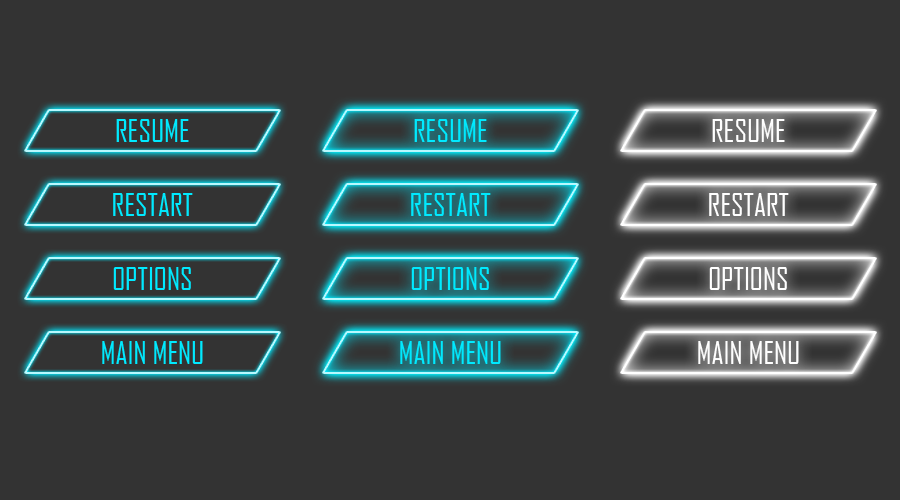
<style>
.page{position:relative;width:900px;height:500px;background:#333333}
.page>*{position:absolute;margin:0}
.t1{font:30px "AgencyFB-Reg";color:#00eaff}
.t2{font:30px "AgencyFB-Reg";color:#ffffff}
</style>
<div class="page">
<p class="t1" style="left:116px;top:119px;width:73px;height:23px">RESUME</p>
<p class="t1" style="left:414px;top:119px;width:73px;height:23px">RESUME</p>
<p class="t2" style="left:712px;top:119px;width:73px;height:23px">RESUME</p>
<p class="t1" style="left:113px;top:193px;width:80px;height:23px">RESTART</p>
<p class="t1" style="left:411px;top:193px;width:80px;height:23px">RESTART</p>
<p class="t2" style="left:709px;top:193px;width:80px;height:23px">RESTART</p>
<p class="t1" style="left:113px;top:267px;width:78px;height:23px">OPTIONS</p>
<p class="t1" style="left:411px;top:267px;width:78px;height:23px">OPTIONS</p>
<p class="t2" style="left:709px;top:267px;width:78px;height:23px">OPTIONS</p>
<p class="t1" style="left:102px;top:341px;width:101px;height:23px">MAIN MENU</p>
<p class="t1" style="left:400px;top:341px;width:101px;height:23px">MAIN MENU</p>
<p class="t2" style="left:698px;top:341px;width:101px;height:23px">MAIN MENU</p>
</div>
